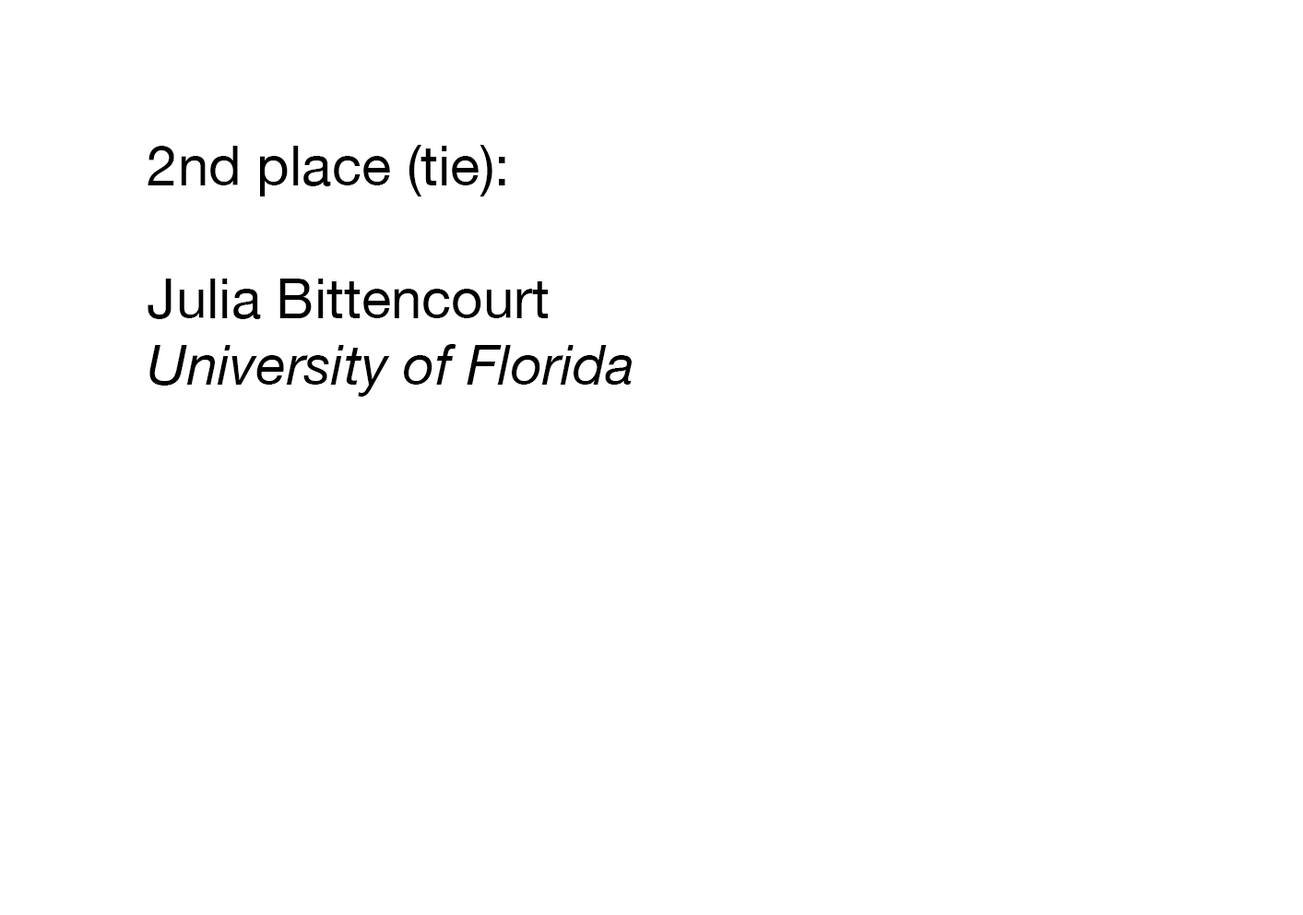
<style>
.page{position:relative;width:1303px;height:915px;background:#ffffff}
.page>*{position:absolute;margin:0}
.t1{font:55.3px "HelveticaNeue";color:#000000}
.t2{font:55.3px "HelveticaNeue-Italic";color:#000000}
</style>
<div class="page">
<p class="t1" style="left:148px;top:145px;width:484px;height:252px">2nd place (tie):<br><br>Julia Bittencourt<br><span class="t2">University of Florida</span></p>
</div>
